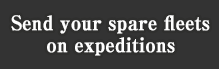
<style>
.page{position:relative;width:219px;height:69px;background:#333333}
.page>*{position:absolute;margin:0}
.t1{font:20px/22px "RyuminPro-ExBold";color:#ffffff;font-weight:bold;scale:0.9 1}
</style>
<div class="page">
<p class="t1" style="left:11px;top:15px;width:199px;height:41px;text-align:center">Send your spare fleets<br>on expeditions</p>
</div>
